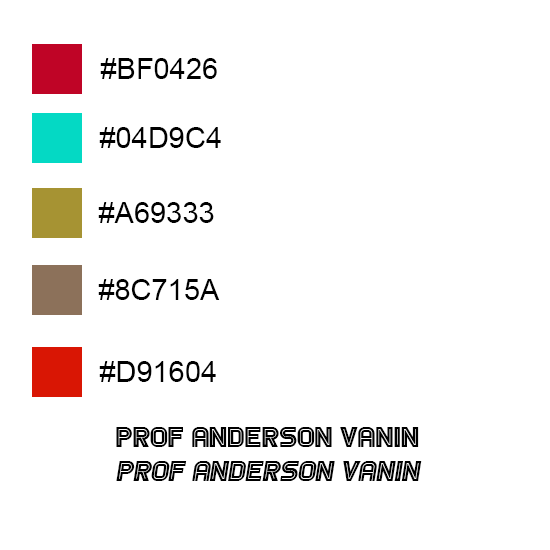
<style>
.page{position:relative;width:550px;height:550px;background:#ffffff}
.page>*{position:absolute;margin:0}
.t1{font:29px "ArialMT";color:#000000}
.t2{font:29px "Games-Regular";color:#000000}
.t3{font:29px "Games-Italic";color:#000000}
</style>
<div class="page">
<p class="t1" style="left:100px;top:58px;width:117px;height:21px">#BF0426</p>
<p class="t1" style="left:99px;top:127px;width:122px;height:21px">#04D9C4</p>
<p class="t1" style="left:98px;top:202px;width:116px;height:21px">#A69333</p>
<p class="t1" style="left:98px;top:279px;width:122px;height:21px">#8C715A</p>
<p class="t1" style="left:99px;top:361px;width:117px;height:21px">#D91604</p>
<p class="t2" style="left:116px;top:427px;width:306px;height:54px">Prof anderson vanin<br><span class="t3">prof anderson vanin</span></p>
</div>
